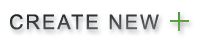
<style>
.page{position:relative;width:200px;height:42px;background:#ffffff}
.page>*{position:absolute;margin:0}
.t1{font:20.3px "ArialMT";letter-spacing:0.1em;color:#2d3437;text-transform:uppercase}
</style>
<div class="page">
<p class="t1" style="left:10px;top:14px;width:149px;height:16px">create new</p>
</div>
